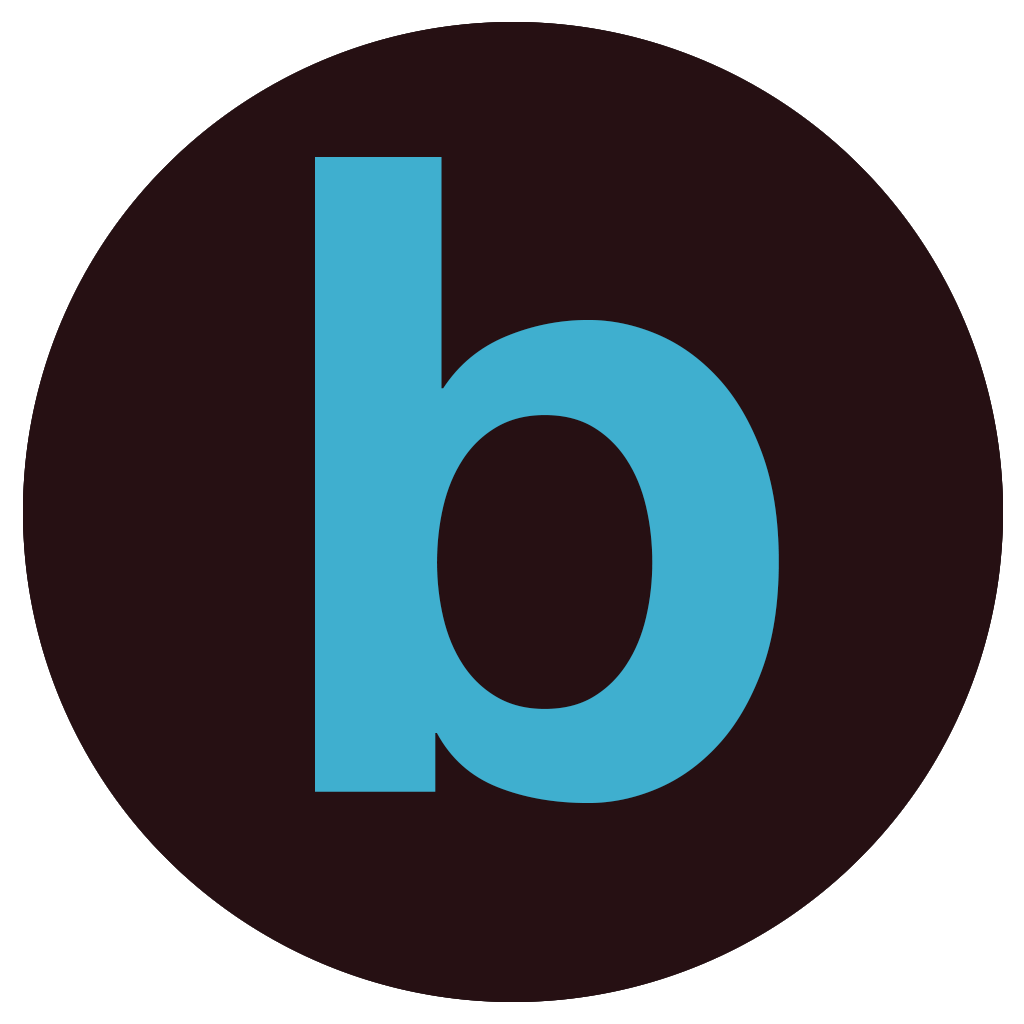
<style>
.page{position:relative;width:1024px;height:1024px;background:#261013}
.page>*{position:absolute;margin:0}
.t1{font:890px "HelveticaNeue-Bold";letter-spacing:0.01em;color:#3fafcf}
</style>
<div class="page">
<p class="t1" style="left:315px;top:157px;width:464px;height:646px">b</p>
</div>
